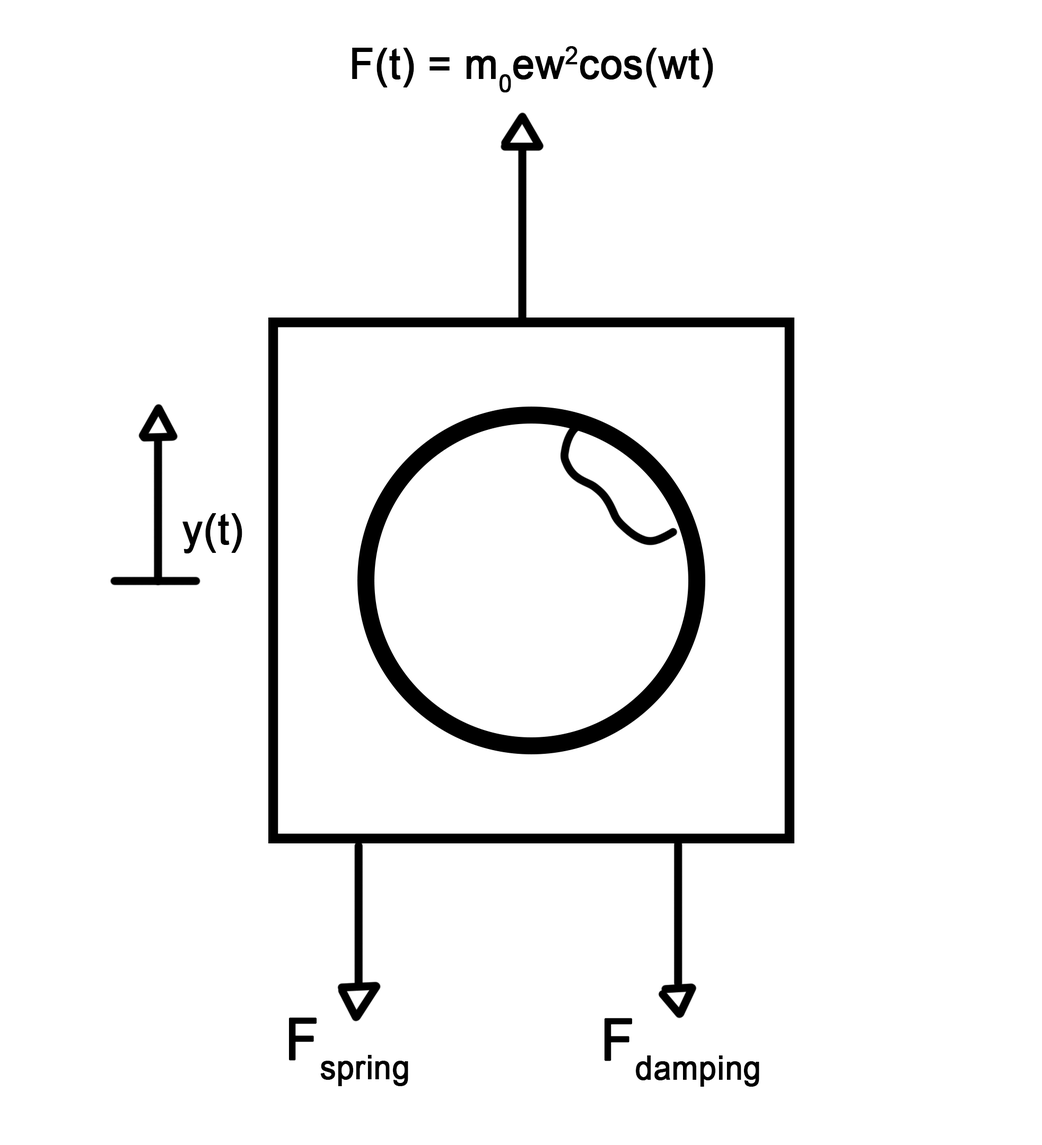
<style>
.page{position:relative;width:1042px;height:1145px;background:#ffffff}
.page>*{position:absolute;margin:0}
.t1{font:42.4px "ArialMT";color:#000000;font-weight:bold;scale:0.94 1}
.t2{font:57.2px "ArialMT";color:#000000;font-weight:bold;scale:0.94 1}
</style>
<div class="page">
<p class="t1" style="left:352px;top:46px;width:361px;height:47px">F(t) = m0ew2cos(wt)</p>
<p class="t1" style="left:182px;top:513px;width:60px;height:40px">y(t)</p>
<p class="t2" style="left:288px;top:1017px;width:120px;height:69px">Fspring</p>
<p class="t2" style="left:604px;top:1018px;width:155px;height:69px">Fdamping</p>
</div>
